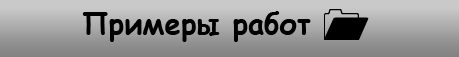
<style>
.page{position:relative;width:459px;height:57px}
.page>*{position:absolute;margin:0}
.t1{font:29.3px "ComicSansMS-Bold";color:#000000}
</style>
<div class="page">
<p class="t1" style="left:82px;top:11px;width:229px;height:31px">Примеры работ</p>
</div>
